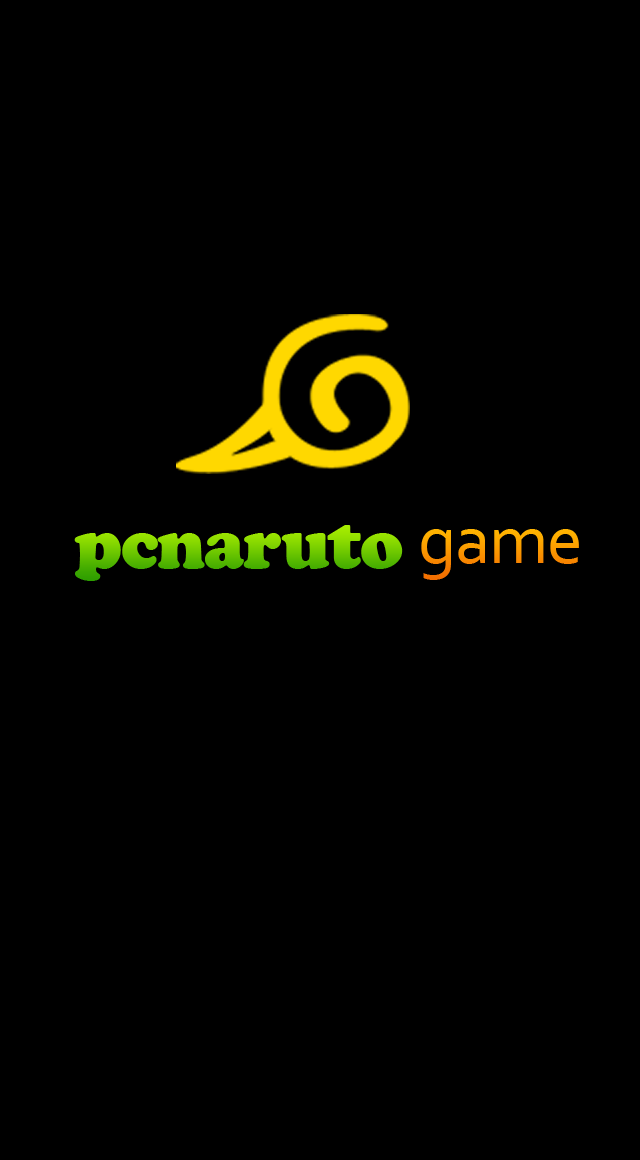
<style>
.page{position:relative;width:640px;height:1160px;background:#000000}
.page>*{position:absolute;margin:0}
.t1{font:72px "CooperBlack";letter-spacing:-0.02em}
.t2{font:72px "Corbel";letter-spacing:-0.02em;color:#fb9f00}
</style>
<div class="page">
<p class="t1" style="left:74px;top:525px;width:329px;height:56px">pcnaruto</p>
<p class="t2" style="left:421px;top:529px;width:158px;height:51px">game</p>
</div>
